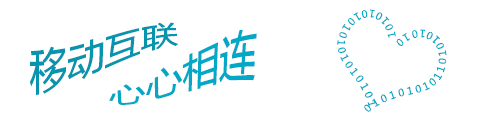
<style>
.page{position:relative;width:480px;height:129px;background:#ffffff}
.page>*{position:absolute;margin:0}
.t1{font:10px/36px "MicrosoftYaHei";color:#03a8c6}
.t2{font:37px/36px "MicrosoftYaHei";color:#0794ae}
.t3{font:37px/36px "MicrosoftYaHei";color:#03a8c6}
</style>
<div class="page">
<p class="t1" style="left:337px;top:9px;width:110px;height:103px">1 0 1 0 1 0 1 0 1 0 1 0 1 0 1 0 1 0 1 0 1 0 1 0 1 0 1 0 1 0 1 1 0 1 0 1 0 1 0</p>
<p class="t2" style="left:30px;top:22px;width:148px;height:73px">移动互联</p>
<p class="t3" style="left:109px;top:30px;width:148px;height:75px">心心相连</p>
</div>
